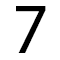
<style>
.page{position:relative;width:60px;height:60px;background:#ffffff}
.page>*{position:absolute;margin:0}
.t1{font:72px "MyriadPro-Regular";color:#000000}
</style>
<div class="page">
<p class="t1" style="left:16px;top:6px;width:30px;height:47px">7</p>
</div>
